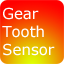
<style>
.page{position:relative;width:64px;height:64px}
.page>*{position:absolute;margin:0}
.t1{font:14.9px "Verdana";color:#ffffff}
</style>
<div class="page">
<p class="t1" style="left:2px;top:7px;width:53px;height:49px">Gear<br>Tooth<br>Sensor</p>
</div>
